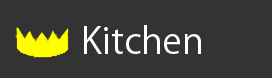
<style>
.page{position:relative;width:272px;height:78px;background:#333333}
.page>*{position:absolute;margin:0}
.t1{font:36px "KozGoPr6N-Regular";color:#ffffff}
</style>
<div class="page">
<p class="t1" style="left:84px;top:25px;width:117px;height:29px">Kitchen</p>
</div>
